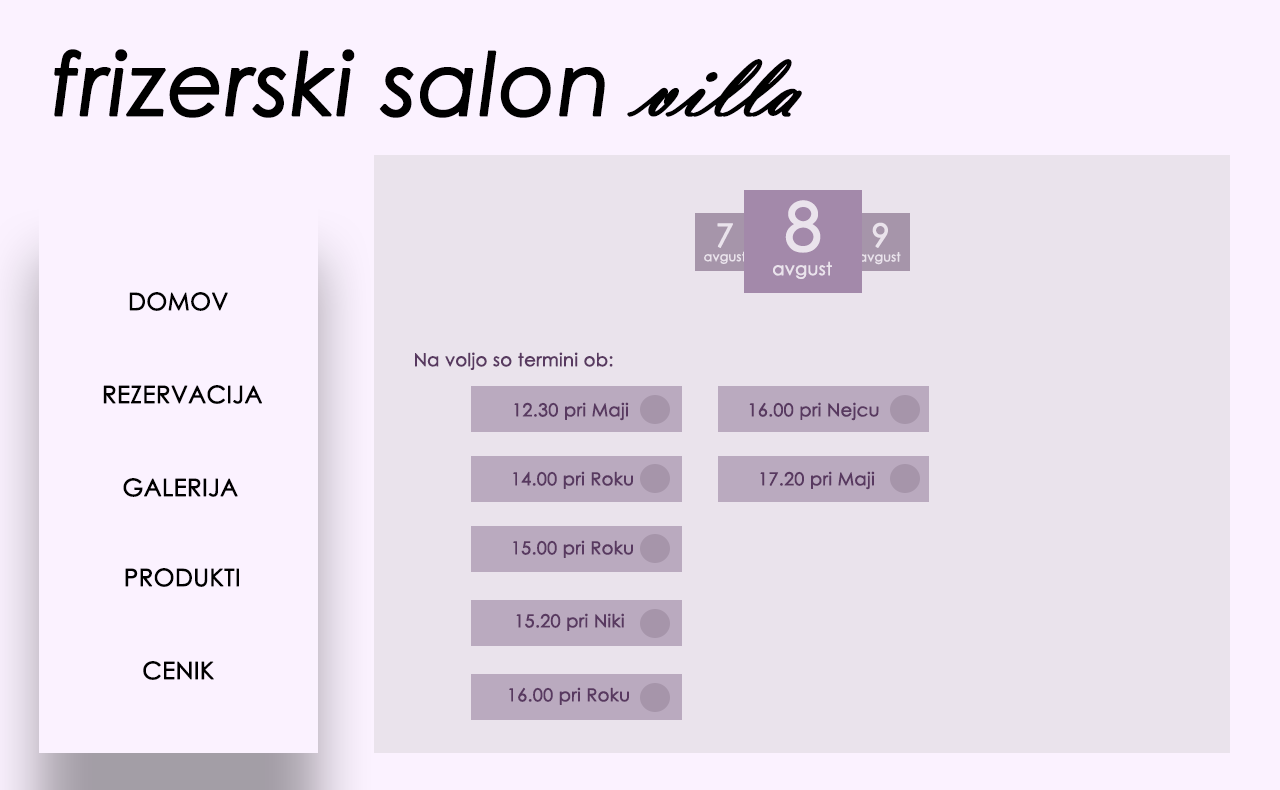
<style>
.page{position:relative;width:1280px;height:790px;background:#fbf2ff}
.page>*{position:absolute;margin:0}
.t1{font:86.4px "CenturyGothic-Italic";color:#000000;font-weight:bold}
.t2{font:94.7px "VladimirScript";color:#000000;font-weight:bold}
.t3{font:66.6px "CenturyGothic";color:#eae3ec;font-weight:bold}
.t4{font:32px "CenturyGothic";color:#eae3ec;font-weight:bold}
.t5{font:12.5px "CenturyGothic";color:#eae3ec;font-weight:bold}
.t6{font:17.7px "CenturyGothic";color:#eae3ec;font-weight:bold}
.t7{font:23.8px "CenturyGothic";color:#000000;font-weight:bold}
.t8{font:17.7px "CenturyGothic";color:#583960;font-weight:bold}
</style>
<div class="page">
<p class="t1" style="left:54px;top:49px;width:748px;height:69px">frizerski salon <span class="t2">villa</span></p>
<p class="t3" style="left:785px;top:200px;width:36px;height:53px">8</p>
<p class="t4" style="left:872px;top:222px;width:16px;height:26px">9</p>
<p class="t4" style="left:717px;top:223px;width:16px;height:25px">7</p>
<p class="t5" style="left:704px;top:251px;width:42px;height:13px">avgust</p>
<p class="t5" style="left:858px;top:252px;width:43px;height:13px">avgust</p>
<p class="t6" style="left:773px;top:261px;width:59px;height:18px">avgust</p>
<p class="t7" style="left:129px;top:292px;width:99px;height:19px">DOMOV</p>
<p class="t8" style="left:415px;top:352px;width:198px;height:18px">Na voljo so termini ob:</p>
<p class="t7" style="left:103px;top:385px;width:159px;height:19px">REZERVACIJA</p>
<p class="t8" style="left:514px;top:402px;width:115px;height:19px">12.30 pri Maji</p>
<p class="t8" style="left:749px;top:402px;width:130px;height:19px">16.00 pri Nejcu</p>
<p class="t8" style="left:513px;top:471px;width:120px;height:18px">14.00 pri Roku</p>
<p class="t8" style="left:760px;top:471px;width:115px;height:19px">17.20 pri Maji</p>
<p class="t7" style="left:123px;top:478px;width:115px;height:19px">GALERIJA</p>
<p class="t8" style="left:513px;top:540px;width:120px;height:18px">15.00 pri Roku</p>
<p class="t7" style="left:125px;top:568px;width:114px;height:19px">PRODUKTI</p>
<p class="t8" style="left:516px;top:613px;width:108px;height:18px">15.20 pri Niki</p>
<p class="t7" style="left:143px;top:661px;width:71px;height:19px">CENIK</p>
<p class="t8" style="left:509px;top:687px;width:120px;height:18px">16.00 pri Roku</p>
</div>
